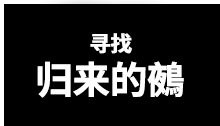
<style>
.page{position:relative;width:220px;height:126px;background:#000000}
.page>*{position:absolute;margin:0}
.t1{font:37.3px/14.1px "SourceHanSansSC-Bold";letter-spacing:-0.03em;color:#ffffff;font-weight:bold}
.t2{font:21.3px/14.1px "SourceHanSansSC-Bold";letter-spacing:-0.03em;color:#ffffff;font-weight:bold}
</style>
<div class="page">
<p class="t1" style="left:37px;top:33px;width:147px;height:65px;text-align:center"><span class="t2">寻找<br><br></span>归来的鵺</p>
</div>
